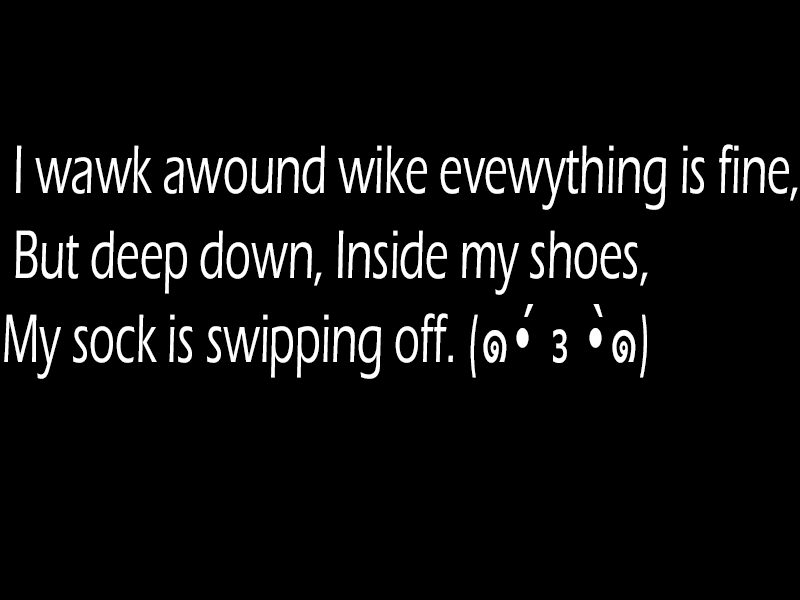
<style>
.page{position:relative;width:800px;height:600px;background:#000000}
.page>*{position:absolute;margin:0}
.t1{font:70.6px "ErasITC-Medium";color:#ffffff;scale:0.62 1}
.t2{font:70.6px "Tahoma";color:#ffffff;scale:0.62 1}
</style>
<div class="page">
<p class="t1" style="left:4px;top:144px;width:794px;height:235px">I wawk awound wike evewything is fine,<br> But deep down, Inside my shoes, <br>My sock is swipping off. (<span class="t2">๑</span>•<span class="t2">́ ₃</span> •<span class="t2">̀๑</span>)</p>
</div>
